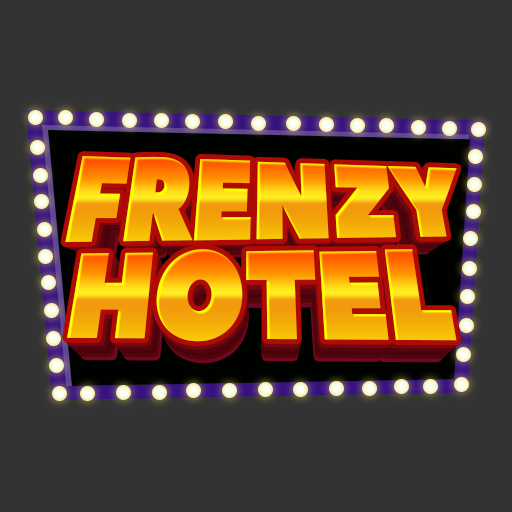
<style>
.page{position:relative;width:512px;height:512px;background:#333333}
.page>*{position:absolute;margin:0}
.t1{font:109.8px "PeaceSans";letter-spacing:-0.025em;scale:0.89 1}
.t2{font:107.6px "PeaceSans";letter-spacing:-0.025em;scale:0.89 1}
.t3{font:105.4px "PeaceSans";letter-spacing:-0.025em;scale:0.89 1}
.t4{font:124.8px "PeaceSans";letter-spacing:-0.025em;scale:0.89 1}
.t5{font:122.3px "PeaceSans";letter-spacing:-0.025em;scale:0.89 1}
.t6{font:119.8px "PeaceSans";letter-spacing:-0.025em;scale:0.89 1}
.t7{font:117.4px "PeaceSans";letter-spacing:-0.025em;scale:0.89 1}
</style>
<div class="page">
<p class="t1" style="left:65px;top:156px;width:392px;height:87px">FRENZY</p>
<p class="t2" style="left:69px;top:159px;width:384px;height:85px">FRENZY</p>
<p class="t3" style="left:73px;top:163px;width:376px;height:83px">FRENZY</p>
<p class="t4" style="left:67px;top:249px;width:390px;height:93px">HOTEL</p>
<p class="t5" style="left:71px;top:254px;width:382px;height:91px">HOTEL</p>
<p class="t6" style="left:74px;top:259px;width:375px;height:89px">HOTEL</p>
<p class="t7" style="left:78px;top:264px;width:367px;height:88px">HOTEL</p>
</div>
